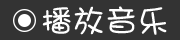
<style>
.page{position:relative;width:180px;height:40px;background:#333333}
.page>*{position:absolute;margin:0}
.t1{font:32px "DFShaoNvW5";color:#ffffff}
</style>
<div class="page">
<p class="t1" style="left:42px;top:6px;width:125px;height:29px">播放音乐</p>
</div>
